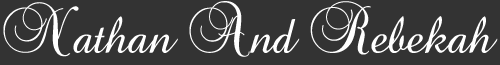
<style>
.page{position:relative;width:500px;height:65px;background:#333333}
.page>*{position:absolute;margin:0}
.t1{font:33.6px "BaroqueScript";color:#ffffff}
</style>
<div class="page">
<p class="t1" style="left:3px;top:1px;width:495px;height:56px">Nathan And Rebekah</p>
</div>
